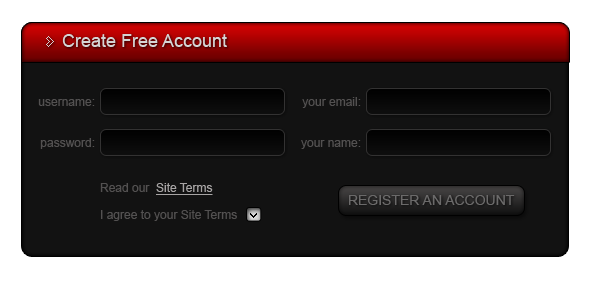
<style>
.page{position:relative;width:594px;height:282px;background:#121212}
.page>*{position:absolute;margin:0}
.t1{font:18px "ArialMT";color:#d5d5d5}
.t2{font:12px "ArialMT";color:#535151}
.t3{font:12px "ArialMT";color:#a7a4a4;text-decoration:underline}
.t4{font:14px "ArialMT";color:#6b6a6a}
</style>
<div class="page">
<p class="t1" style="left:62px;top:34px;width:165px;height:13px">Create Free Account</p>
<p class="t2" style="left:38px;top:99px;width:57px;height:7px">username:</p>
<p class="t2" style="left:302px;top:97px;width:59px;height:11px">your email:</p>
<p class="t2" style="left:40px;top:138px;width:55px;height:11px">password:</p>
<p class="t2" style="left:301px;top:140px;width:60px;height:9px">your name:</p>
<p class="t3" style="left:100px;top:183px;width:113px;height:12px"><span class="t2">Read our  </span>Site Terms</p>
<p class="t4" style="left:349px;top:195px;width:166px;height:10px">REGISTER AN ACCOUNT</p>
<p class="t2" style="left:101px;top:210px;width:136px;height:11px">I agree to your Site Terms</p>
</div>
